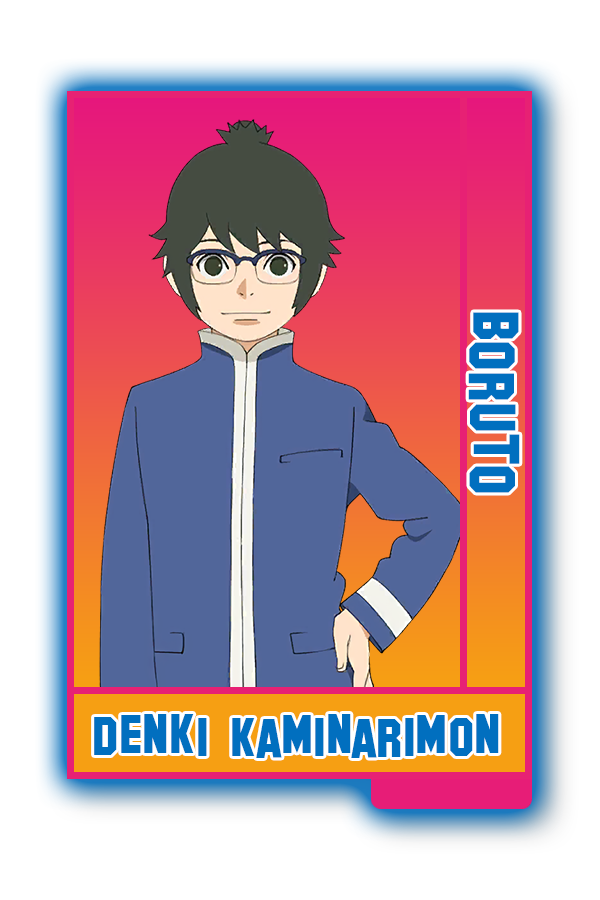
<style>
.page{position:relative;width:600px;height:900px;background:#ffffff}
.page>*{position:absolute;margin:0}
.t1{font:64.7px "SFHollywoodHills";color:#016fbf}
.t2{font:55.4px "SFHollywoodHills";color:#016fbf}
</style>
<div class="page">
<p class="t1" style="left:468px;top:312px;width:52px;height:181px;rotate:90deg">Boruto</p>
<p class="t2" style="left:94px;top:714px;width:405px;height:44px">Denki Kaminarimon</p>
</div>
